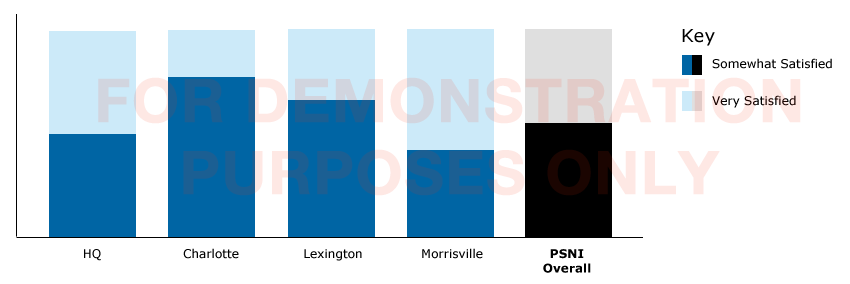
<style>
.page{position:relative;width:850px;height:284px;background:#ffffff}
.page>*{position:absolute;margin:0}
.t1{font:18px "Verdana";color:#000000}
.t2{font:12px "Verdana";color:#000000}
.t3{font:12px "Verdana"}
.t4{font:12px "Verdana-Bold";color:#000000}
</style>
<div class="page">
<p class="t1" style="left:682px;top:29px;width:33px;height:17px">Key</p>
<p class="t2" style="left:712px;top:58px;width:120px;height:11px">Somewhat Satisfied</p>
<p class="t3" style="left:712px;top:95px;width:84px;height:13px">Very Satisfied</p>
<p class="t2" style="left:84px;top:249px;width:17px;height:12px">HQ</p>
<p class="t2" style="left:183px;top:248px;width:56px;height:11px">Charlotte</p>
<p class="t2" style="left:304px;top:249px;width:58px;height:12px">Lexington</p>
<p class="t2" style="left:422px;top:248px;width:61px;height:11px">Morrisville</p>
<p class="t4" style="left:543px;top:249px;width:48px;height:24px;text-align:center">PSNI<br>Overall</p>
</div>
